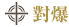
<style>
.page{position:relative;width:69px;height:27px;background:#ffffff}
.page>*{position:absolute;margin:0}
.t1{font:18px "RyuminPro-Heavy";color:#ae9442}
</style>
<div class="page">
<p class="t1" style="left:33px;top:5px;width:36px;height:18px">對爆</p>
</div>
